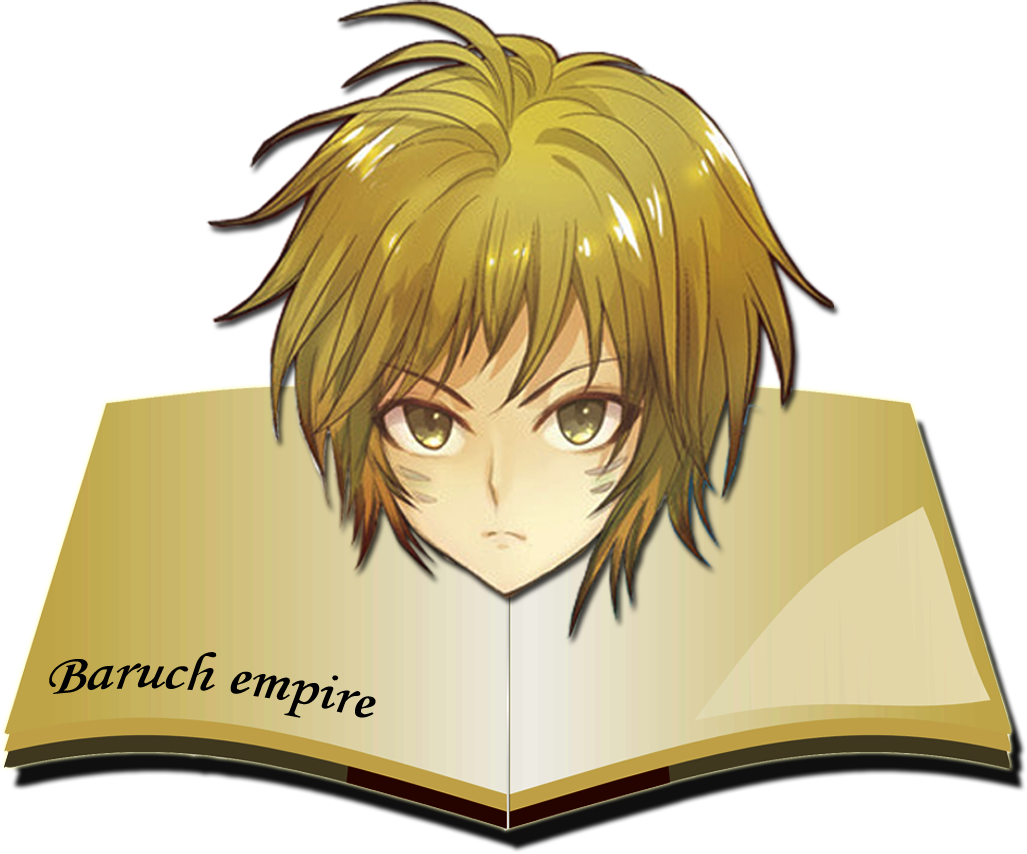
<style>
.page{position:relative;width:1027px;height:854px;background:#ffffff}
.page>*{position:absolute;margin:0}
.t1{font:56px "MonotypeCorsiva";color:#010101;scale:1.16 1}
</style>
<div class="page">
<p class="t1" style="left:49px;top:652px;width:327px;height:66px;rotate:5deg">Baruch empire</p>
</div>
